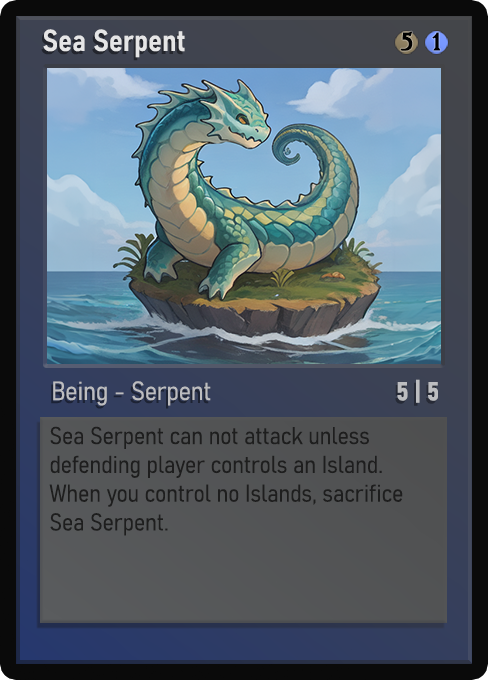
<style>
.page{position:relative;width:488px;height:680px}
.page>*{position:absolute;margin:0}
.t1{font:30px "Bahnschrift-SemiBoldSemiCondensed";color:#f2f2f2;font-weight:bold}
.t2{font:25px "WTRRoycroft";color:#000000;font-weight:bold;scale:1.09 1}
.t3{font:26px "Bahnschrift-LightSemiCondensed";color:#c8c8c8;font-weight:bold}
.t4{font:26px "Bahnschrift-BoldSemiCondensed";color:#bcbdc0;font-weight:bold}
.t5{font:24px "Bahnschrift-LightSemiCondensed";color:#1e1e1e;font-weight:bold}
</style>
<div class="page">
<p class="t1" style="left:43px;top:29px;width:142px;height:29px;opacity:0.9">Sea Serpent</p>
<p class="t2" style="left:400px;top:31px;width:13px;height:20px">5</p>
<p class="t2" style="left:432px;top:32px;width:9px;height:19px">1</p>
<p class="t3" style="left:53px;top:381px;width:158px;height:25px;opacity:0.9">Being - Serpent</p>
<p class="t4" style="left:397px;top:379px;width:41px;height:24px">5 | 5</p>
<p class="t5" style="left:49px;top:426px;width:354px;height:110px">Sea Serpent can not attack unless defending player controls an Island. When you control no Islands, sacrifice Sea Serpent.</p>
</div>
